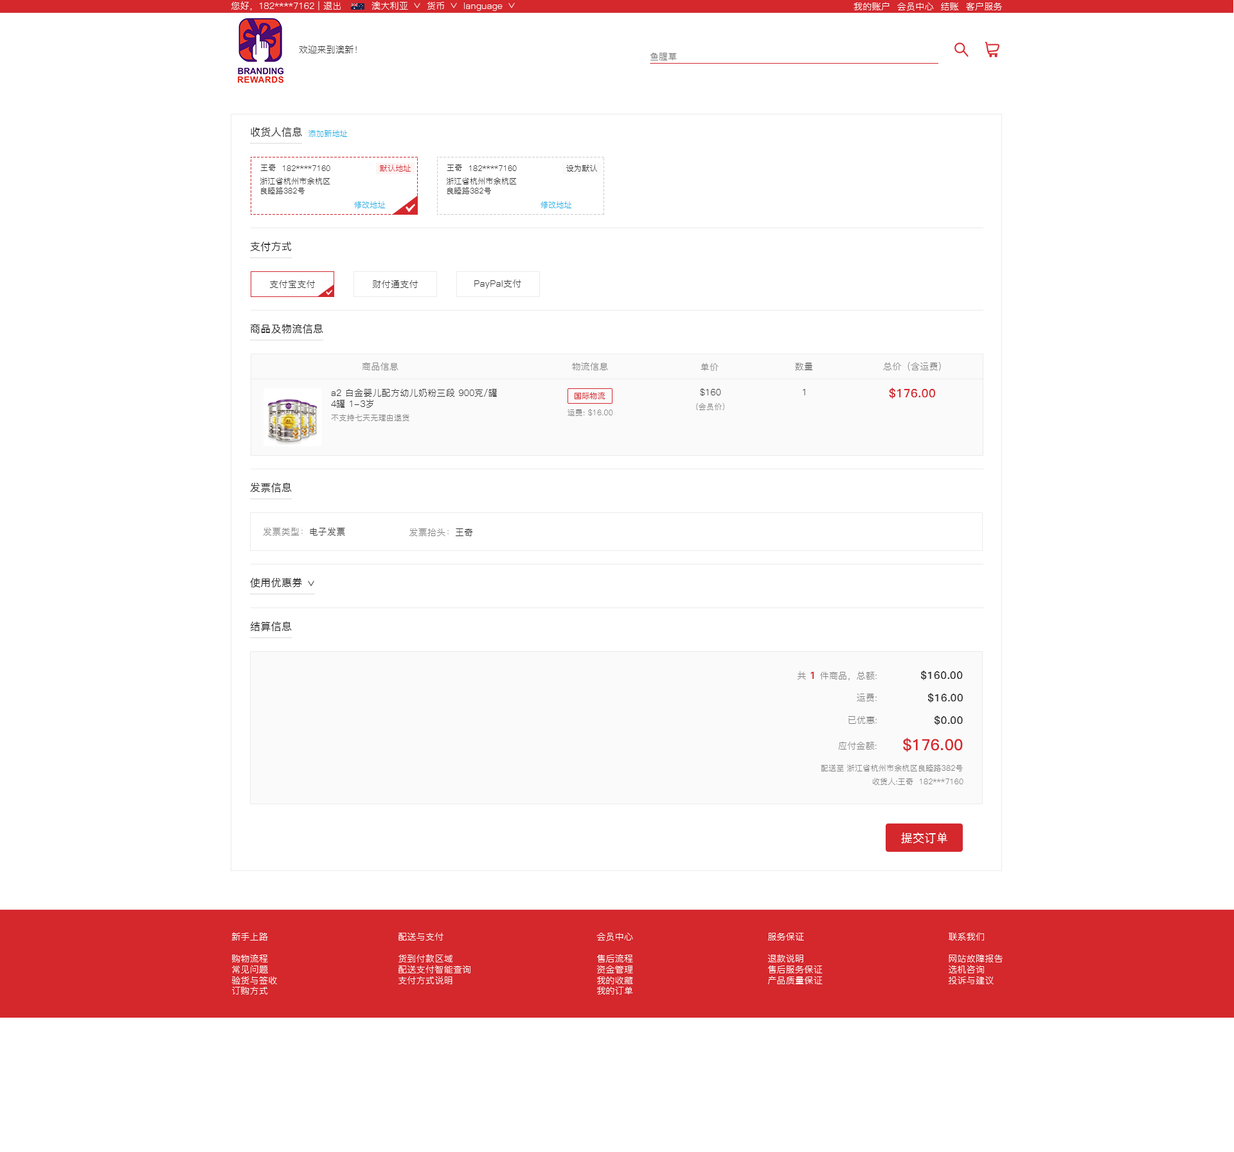
<style>
.page{position:relative;width:1234px;height:1152px;background:#ffffff}
.page>*{position:absolute;margin:0}
.t1{font:9px "PingFang-SC-Regular";letter-spacing:0.02em;color:#ffffff}
.t2{font:9px "PingFang-SC-Regular";letter-spacing:0.02em;color:#333333}
.t3{font:9px "PingFang-SC-Regular";letter-spacing:0.02em;color:#767676}
.t4{font:10.3px "PingFang-SC-Medium";letter-spacing:0.02em;color:#333333}
.t5{font:7.7px "PingFang-SC-Regular";letter-spacing:0.02em;color:#18afe7}
.t6{font:7.7px "PingFang-SC-Regular";letter-spacing:0.02em;color:#333333}
.t7{font:7.7px "PingFang-SC-Regular";letter-spacing:0.02em;color:#d4282d}
.t8{font:9px "PingFang-SC-Regular";letter-spacing:0.02em;color:#808080}
.t9{font:11.6px "PingFang-SC-Bold";letter-spacing:0.02em;color:#d4282d}
.t10{font:7.7px "PingFang-SC-Medium";letter-spacing:0.02em;color:#d4282d}
.t11{font:7.7px "PingFang-SC-Regular";letter-spacing:0.02em;color:#808080}
.t12{font:10.3px "PingFang-SC-Bold";letter-spacing:0.02em;color:#d4282d}
.t13{font:10.3px "PingFang-SC-Bold";letter-spacing:0.02em;color:#333333}
.t14{font:15.4px "PingFang-SC-Bold";letter-spacing:0.02em;color:#d4282d}
.t15{font:11.6px "PingFang-SC-Medium";letter-spacing:0.02em;color:#fdf4f4}
.t16{font:9px "PingFang-SC-Regular";letter-spacing:0.02em;color:#fffefe}
</style>
<div class="page">
<p class="t1" style="left:231px;top:1px;width:110px;height:9px">您好，182****7162 | 退出</p>
<p class="t1" style="left:372px;top:1px;width:36px;height:9px">澳大利亚</p>
<p class="t1" style="left:427px;top:2px;width:17px;height:8px">货币</p>
<p class="t1" style="left:464px;top:3px;width:39px;height:8px">language</p>
<p class="t1" style="left:854px;top:2px;width:148px;height:9px">我的账户  会员中心  结账  客户服务</p>
<p class="t2" style="left:299px;top:45px;width:58px;height:8px">欢迎来到澳新！</p>
<p class="t3" style="left:650px;top:53px;width:27px;height:7px">鱼腥草</p>
<p class="t4" style="left:251px;top:127px;width:51px;height:10px">收货人信息</p>
<p class="t5" style="left:309px;top:130px;width:39px;height:7px">添加新地址</p>
<p class="t6" style="left:260px;top:164px;width:16px;height:7px">王奇</p>
<p class="t6" style="left:283px;top:165px;width:47px;height:6px">182****7160</p>
<p class="t7" style="left:380px;top:165px;width:31px;height:7px">默认地址</p>
<p class="t6" style="left:447px;top:164px;width:15px;height:7px">王奇</p>
<p class="t6" style="left:469px;top:165px;width:48px;height:6px">182****7160</p>
<p class="t6" style="left:566px;top:165px;width:31px;height:7px">设为默认</p>
<p class="t6" style="left:260px;top:177px;width:70px;height:17px">浙江省杭州市余杭区<br>良睦路382号</p>
<p class="t6" style="left:446px;top:177px;width:71px;height:17px">浙江省杭州市余杭区<br>良睦路382号</p>
<p class="t5" style="left:354px;top:201px;width:32px;height:7px">修改地址</p>
<p class="t5" style="left:541px;top:201px;width:31px;height:7px">修改地址</p>
<p class="t4" style="left:250px;top:242px;width:42px;height:9px">支付方式</p>
<p class="t2" style="left:270px;top:280px;width:45px;height:8px">支付宝支付</p>
<p class="t2" style="left:372px;top:280px;width:46px;height:8px">财付通支付</p>
<p class="t2" style="left:474px;top:279px;width:47px;height:10px">PayPal支付</p>
<p class="t4" style="left:250px;top:324px;width:73px;height:10px">商品及物流信息</p>
<p class="t8" style="left:362px;top:362px;width:37px;height:8px">商品信息</p>
<p class="t8" style="left:572px;top:362px;width:36px;height:8px">物流信息</p>
<p class="t8" style="left:701px;top:363px;width:18px;height:8px">单价</p>
<p class="t8" style="left:795px;top:363px;width:18px;height:7px">数量</p>
<p class="t8" style="left:883px;top:362px;width:58px;height:9px">总价（含运费）</p>
<p class="t2" style="left:331px;top:389px;width:166px;height:19px">a2 白金婴儿配方幼儿奶粉三段 900克/罐 <br>4罐 1-3岁</p>
<p class="t2" style="left:700px;top:388px;width:21px;height:8px">$160</p>
<p class="t2" style="left:803px;top:389px;width:3px;height:6px">1</p>
<p class="t9" style="left:889px;top:388px;width:46px;height:11px">$176.00</p>
<p class="t10" style="left:575px;top:392px;width:31px;height:7px">国际物流</p>
<p class="t11" style="left:568px;top:409px;width:45px;height:7px">运费: $16.00</p>
<p class="t11" style="left:696px;top:403px;width:28px;height:7px">(会员价)</p>
<p class="t11" style="left:331px;top:414px;width:79px;height:7px">不支持七天无理由退货</p>
<p class="t4" style="left:250px;top:483px;width:42px;height:9px">发票信息</p>
<p class="t8" style="left:263px;top:527px;width:82px;height:9px">发票类型：<span class="t2">电子发票</span></p>
<p class="t8" style="left:410px;top:528px;width:63px;height:8px">发票抬头：<span class="t2">王奇</span></p>
<p class="t4" style="left:250px;top:578px;width:52px;height:10px">使用优惠券</p>
<p class="t4" style="left:250px;top:622px;width:42px;height:9px">结算信息</p>
<p class="t8" style="left:798px;top:671px;width:79px;height:9px">共 <span class="t12">1 </span>件商品，总额:</p>
<p class="t13" style="left:921px;top:670px;width:42px;height:10px">$160.00</p>
<p class="t8" style="left:857px;top:694px;width:20px;height:7px">运费:</p>
<p class="t13" style="left:928px;top:693px;width:35px;height:10px">$16.00</p>
<p class="t8" style="left:849px;top:716px;width:28px;height:8px">已优惠:</p>
<p class="t13" style="left:935px;top:716px;width:28px;height:9px">$0.00</p>
<p class="t14" style="left:903px;top:737px;width:60px;height:15px">$176.00</p>
<p class="t8" style="left:838px;top:741px;width:39px;height:9px">应付金额:</p>
<p class="t11" style="left:821px;top:764px;width:142px;height:7px">配送至 浙江省杭州市余杭区良睦路382号</p>
<p class="t11" style="left:873px;top:778px;width:91px;height:7px">收货人:王奇  182***7160</p>
<p class="t15" style="left:901px;top:833px;width:47px;height:10px">提交订单</p>
<p class="t16" style="left:231px;top:932px;width:46px;height:63px">新手上路<br><br>购物流程<br>常见问题<br>验货与签收<br>订购方式</p>
<p class="t16" style="left:399px;top:932px;width:72px;height:52px">配送与支付<br><br>货到付款区域<br>配送支付智能查询<br>支付方式说明</p>
<p class="t16" style="left:597px;top:933px;width:36px;height:62px">会员中心<br><br>售后流程<br>资金管理<br>我的收藏<br>我的订单</p>
<p class="t16" style="left:768px;top:933px;width:55px;height:51px">服务保证<br><br>退款说明<br>售后服务保证<br>产品质量保证</p>
<p class="t16" style="left:948px;top:933px;width:55px;height:51px">联系我们<br><br>网站故障报告<br>选机咨询<br>投诉与建议</p>
</div>
